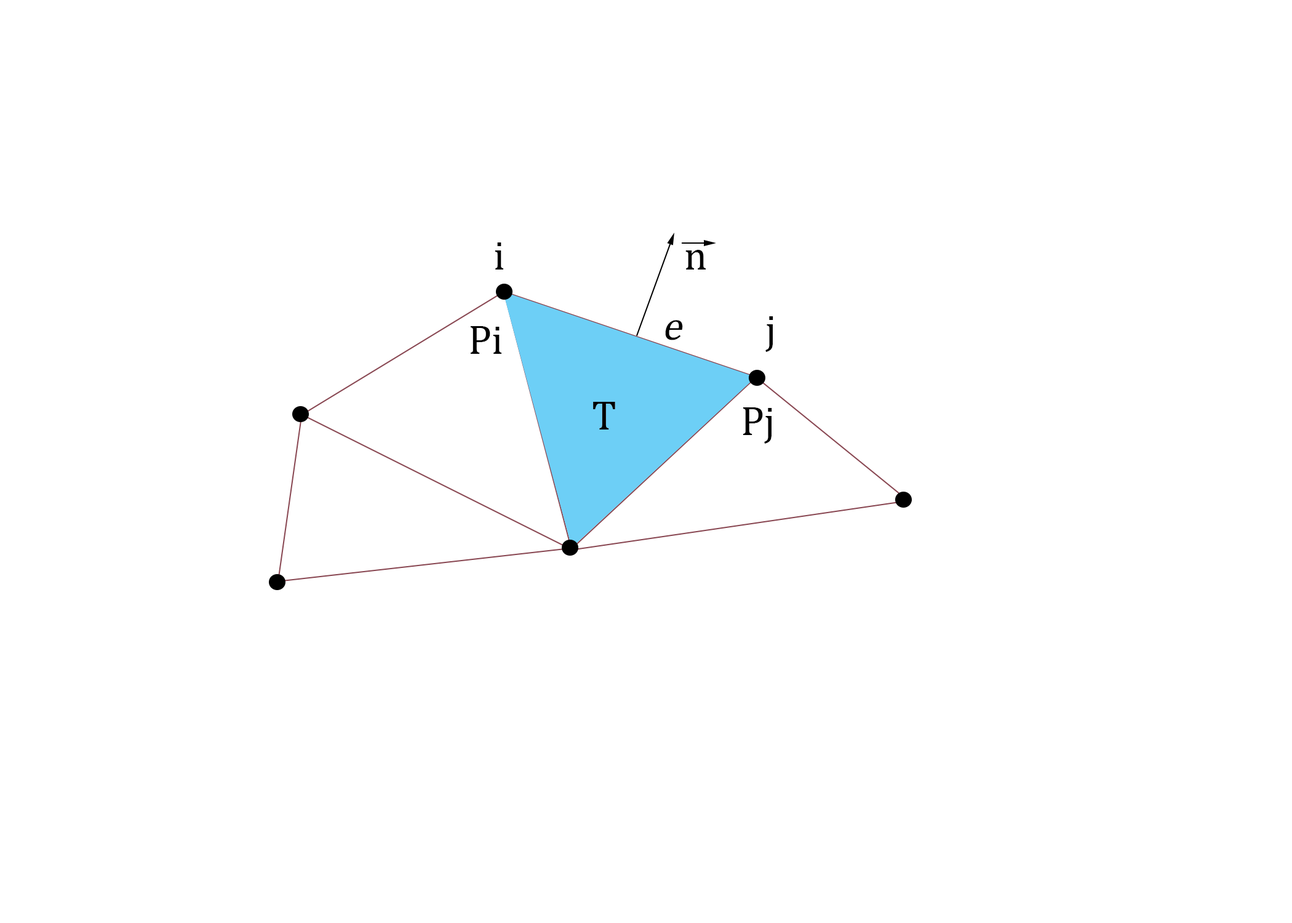
<style>
.page{position:relative;width:1292px;height:923px;background:#ffffff}
.page>*{position:absolute;margin:0}
.t1{font:41px "Cambria";color:#000000}
.t2{font:41px "Cambria";color:#000000;font-style:italic}
</style>
<div class="page">
<p class="t1" style="left:495px;top:242px;width:8px;height:27px">i</p>
<p class="t1" style="left:685px;top:250px;width:21px;height:19px">n</p>
<p class="t1" style="left:765px;top:316px;width:8px;height:36px">j</p>
<p class="t1" style="left:471px;top:326px;width:30px;height:28px">Pi</p>
<p class="t2" style="left:665px;top:320px;width:18px;height:20px">e</p>
<p class="t1" style="left:743px;top:407px;width:29px;height:37px">Pj</p>
</div>
